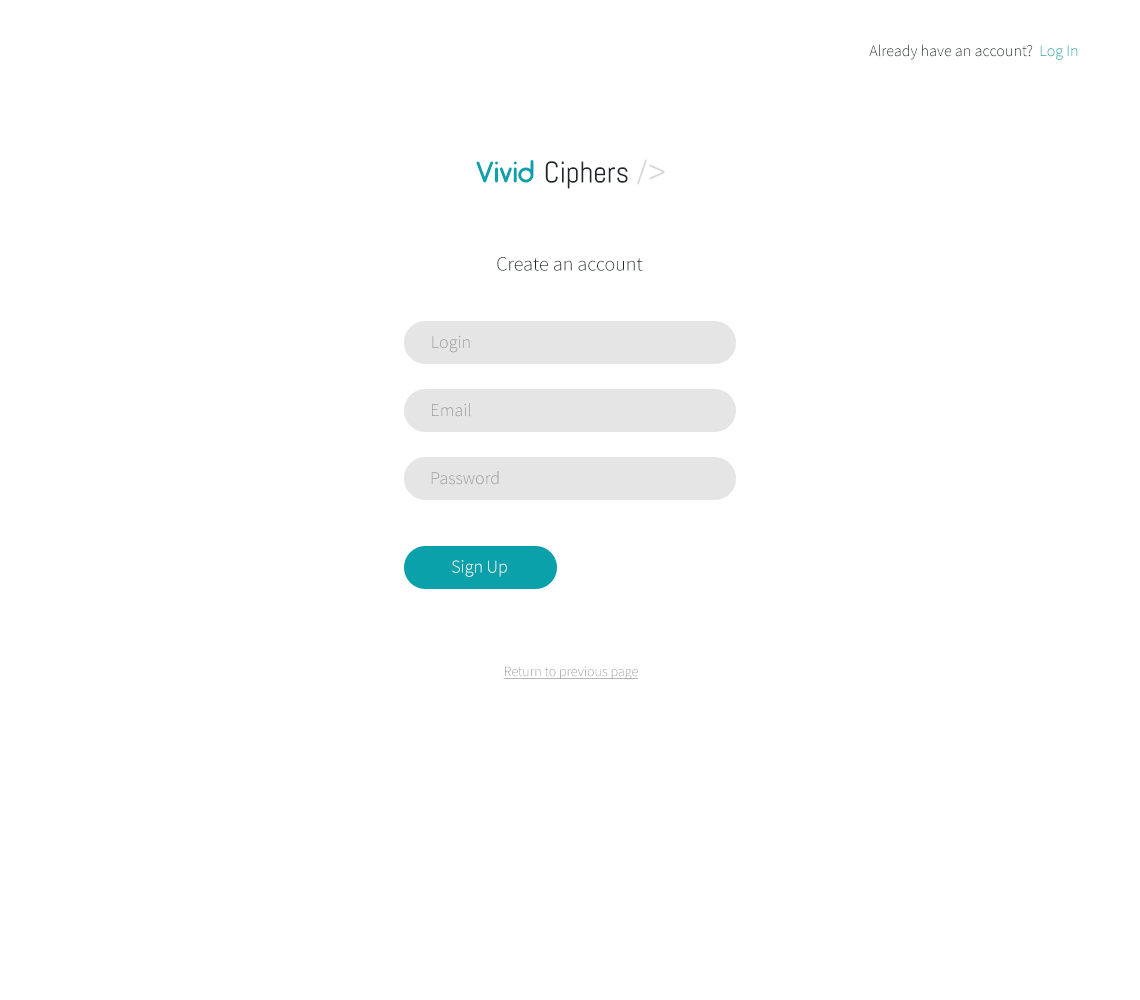
<style>
.page{position:relative;width:1140px;height:1000px;background:#ffffff}
.page>*{position:absolute;margin:0}
.t1{font:16px "SourceSansPro-Light";color:#1d2829}
.t2{font:30px "Abel-Regular";color:#1d2728}
.t3{font:30px "Arciform";color:#0aa1aa}
.t4{font:30px "Abel-Regular";color:#d8d8d8}
.t5{font:20px "SourceSansPro-Light";color:#1d2829}
.t6{font:18px "SourceSansPro-Light";color:#9a9a9a}
.t7{font:18px "SourceSansPro-Light";color:#ffffff}
.t8{font:14px "SourceSansPro-Light";color:#9a9a9a;text-decoration:underline}
</style>
<div class="page">
<p class="t1" style="left:869px;top:44px;width:209px;height:16px">Already have an account?  Log In</p>
<p class="t2" style="left:476px;top:159px;width:189px;height:30px"><span class="t3">Vivid </span>Ciphers <span class="t4">/&gt;</span></p>
<p class="t5" style="left:497px;top:257px;width:146px;height:14px">Create an account</p>
<p class="t6" style="left:432px;top:335px;width:38px;height:18px">Login</p>
<p class="t6" style="left:432px;top:403px;width:39px;height:14px">Email</p>
<p class="t6" style="left:431px;top:471px;width:68px;height:14px">Password</p>
<p class="t7" style="left:452px;top:560px;width:55px;height:17px">Sign Up</p>
<p class="t8" style="left:503px;top:666px;width:136px;height:14px">Return to previous page</p>
</div>
